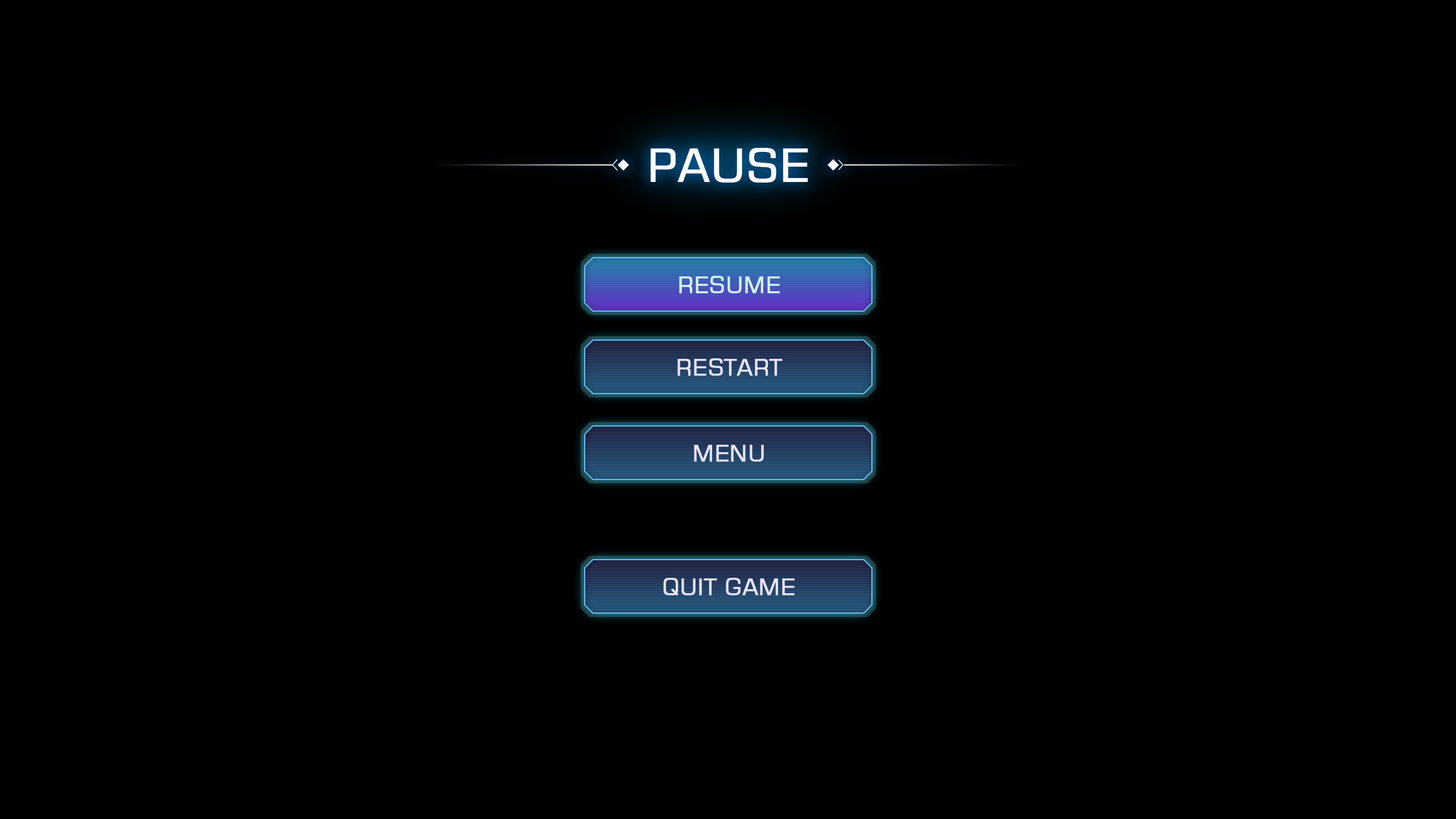
<style>
.page{position:relative;width:1456px;height:819px;background:#000000}
.page>*{position:absolute;margin:0}
.t1{font:45.5px "Square721BT-Roman";color:#ffffff;font-weight:bold}
.t2{font:22.7px "Square721BT-Roman";color:#d0f4fa;font-weight:bold}
.t3{font:22.7px "Square721BT-Roman";color:#e5e4ff;font-weight:bold}
</style>
<div class="page">
<p class="t1" style="left:651px;top:148px;width:157px;height:35px">PAUSE</p>
<p class="t2" style="left:679px;top:276px;width:101px;height:17px">RESUME</p>
<p class="t3" style="left:677px;top:358px;width:106px;height:18px">RESTART</p>
<p class="t3" style="left:694px;top:445px;width:70px;height:17px">MENU</p>
<p class="t3" style="left:663px;top:578px;width:132px;height:17px">QUIT GAME</p>
</div>
